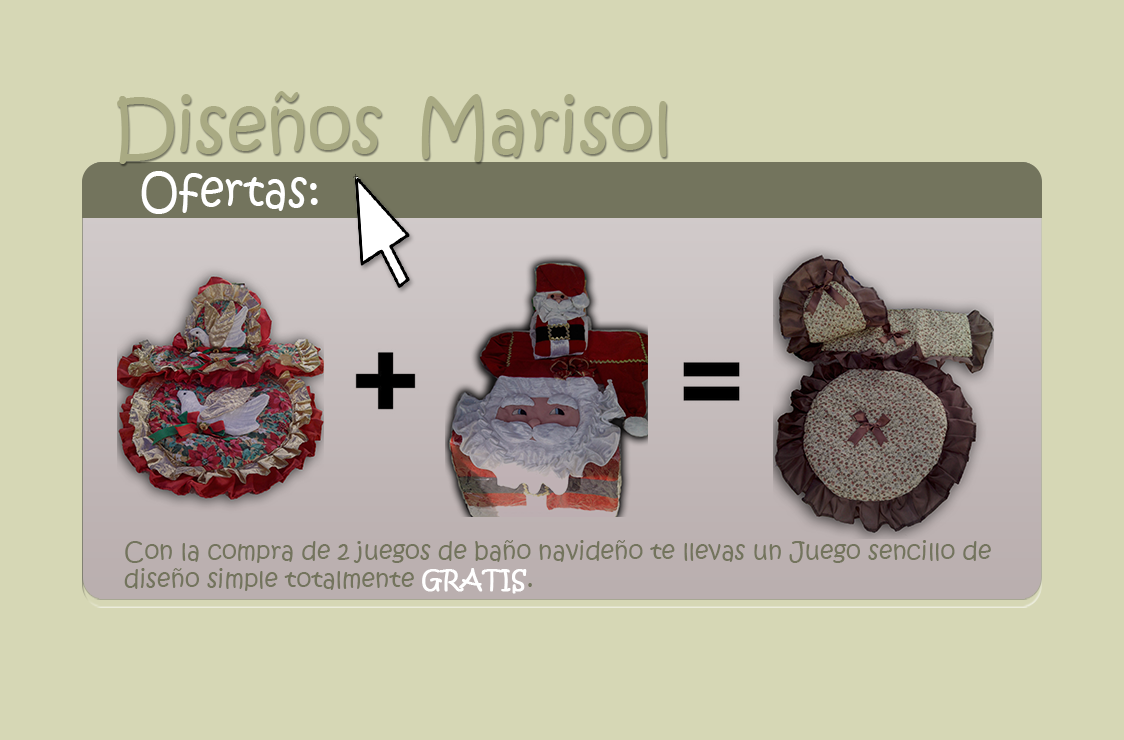
<style>
.page{position:relative;width:1124px;height:740px;background:#d6d7b5}
.page>*{position:absolute;margin:0}
.t1{font:72px "KristenITC-Regular";color:#a9aa83}
.t2{font:48px "KristenITC-Regular";color:#ffffff;scale:0.9 1}
.t3{font:24px "KristenITC-Regular";color:#73745d}
.t4{font:24px "KristenITC-Regular";color:#ffffff;font-weight:bold}
</style>
<div class="page">
<p class="t1" style="left:117px;top:91px;width:265px;height:73px">Diseños</p>
<p class="t1" style="left:421px;top:94px;width:246px;height:68px">Marisol</p>
<p class="t2" style="left:141px;top:171px;width:177px;height:43px">Ofertas:</p>
<p class="t3" style="left:124px;top:540px;width:867px;height:54px">Con la compra de 2 juegos de baño navideño te llevas un Juego sencillo de <br>diseño simple totalmente <span class="t4">GRATIS</span>.</p>
</div>
